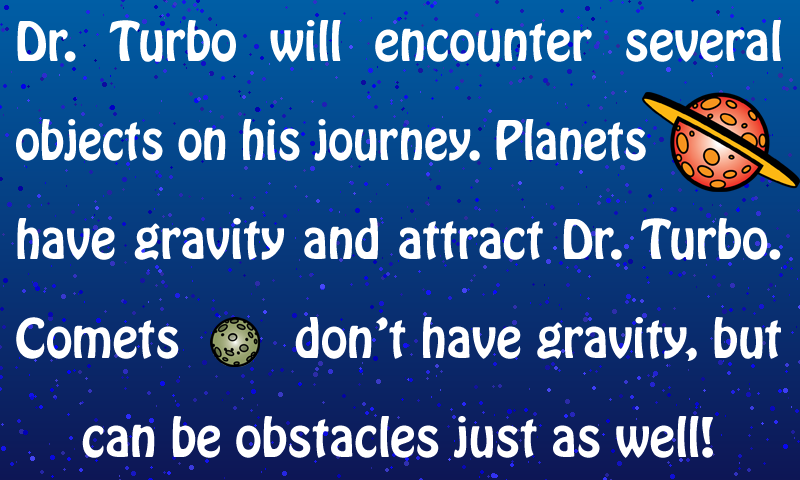
<style>
.page{position:relative;width:800px;height:480px}
.page>*{position:absolute;margin:0}
.t1{font:48px/99px "HoboStd";color:#ffffff}
.t2{font:48px/99px "HoboStd";color:#ffffff;scale:0.95 1}
</style>
<div class="page">
<p class="t1" style="left:16px;top:20px;width:765px;height:438px;text-align:justify">Dr. Turbo will encounter several<br><span class="t2">objects on his journey. Planets<br></span>have gravity and attract Dr. Turbo. Comets        don’t have gravity, but can be obstacles just as well!</p>
</div>
